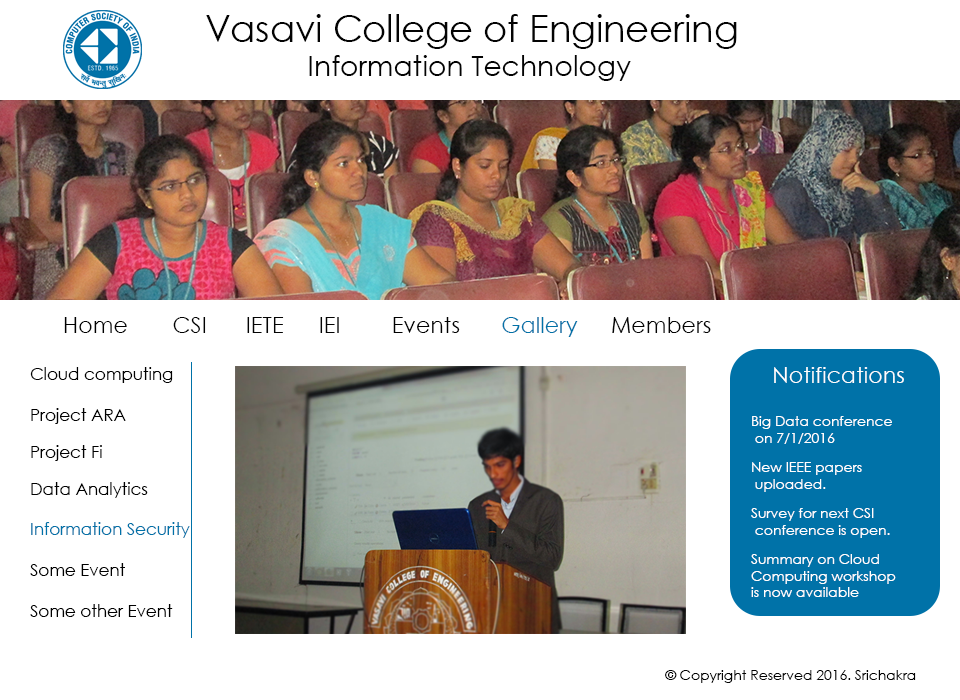
<style>
.page{position:relative;width:960px;height:700px;background:#ffffff}
.page>*{position:absolute;margin:0}
.t1{font:36.6px "CenturyGothic";color:#030303}
.t2{font:28.2px "CenturyGothic";color:#030303}
.t3{font:22.2px "CenturyGothic";color:#030303}
.t4{font:22.2px "CenturyGothic";color:#000000}
.t5{font:22.2px "CenturyGothic";color:#010101}
.t6{font:22.2px "CenturyGothic";color:#0072a8}
.t7{font:16.7px "CenturyGothic";color:#000000}
.t8{font:22.2px "CenturyGothic";color:#ffffff}
.t9{font:13.9px/16.7px "CenturyGothic";color:#ffffff}
.t10{font:16.7px "CenturyGothic";color:#0072a8}
.t11{font:13.9px "CenturyGothic";color:#010101}
</style>
<div class="page">
<p class="t1" style="left:206px;top:14px;width:531px;height:35px">Vasavi College of Engineering</p>
<p class="t2" style="left:309px;top:55px;width:322px;height:26px">Information Technology</p>
<p class="t3" style="left:64px;top:317px;width:647px;height:20px"><span class="t4">Home  </span><span class="t5">CSI </span> IETE IEI  <span class="t4">Events  </span><span class="t6">Gallery</span> Members</p>
<p class="t7" style="left:30px;top:367px;width:143px;height:16px">Cloud computing</p>
<p class="t8" style="left:774px;top:367px;width:130px;height:16px">Notifications</p>
<p class="t7" style="left:31px;top:408px;width:95px;height:16px">Project ARA</p>
<p class="t9" style="left:752px;top:416px;width:140px;height:28px">Big Data conference<br> on 7/1/2016</p>
<p class="t7" style="left:31px;top:445px;width:71px;height:16px">Project Fi</p>
<p class="t9" style="left:752px;top:462px;width:110px;height:30px">New IEEE papers <br> uploaded.</p>
<p class="t7" style="left:31px;top:482px;width:117px;height:16px">Data Analytics</p>
<p class="t9" style="left:751px;top:508px;width:139px;height:30px">Survey for next CSI <br> conference is open.</p>
<p class="t10" style="left:31px;top:522px;width:159px;height:16px">Information Security</p>
<p class="t9" style="left:751px;top:554px;width:145px;height:43px">Summary on Cloud <br>Computing workshop <br>is now available</p>
<p class="t7" style="left:30px;top:563px;width:95px;height:13px">Some Event</p>
<p class="t7" style="left:30px;top:604px;width:143px;height:13px">Some other Event</p>
<p class="t11" style="left:665px;top:670px;width:251px;height:13px">© Copyright Reserved 2016. Srichakra</p>
</div>
